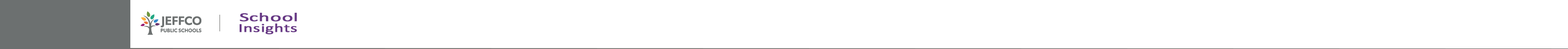
<style>
.page{position:relative;width:1568px;height:49px;background:#ffffff}
.page>*{position:absolute;margin:0}
.t1{font:12.2px "Calibri";color:#673785;font-weight:bold;scale:1.7 1}
.t2{font:12.2px "Calibri";color:#673785;font-weight:bold;scale:1.45 1}
</style>
<div class="page">
<p class="t1" style="left:240px;top:13px;width:57px;height:9px">School</p>
<p class="t2" style="left:240px;top:24px;width:57px;height:10px">Insights</p>
</div>
